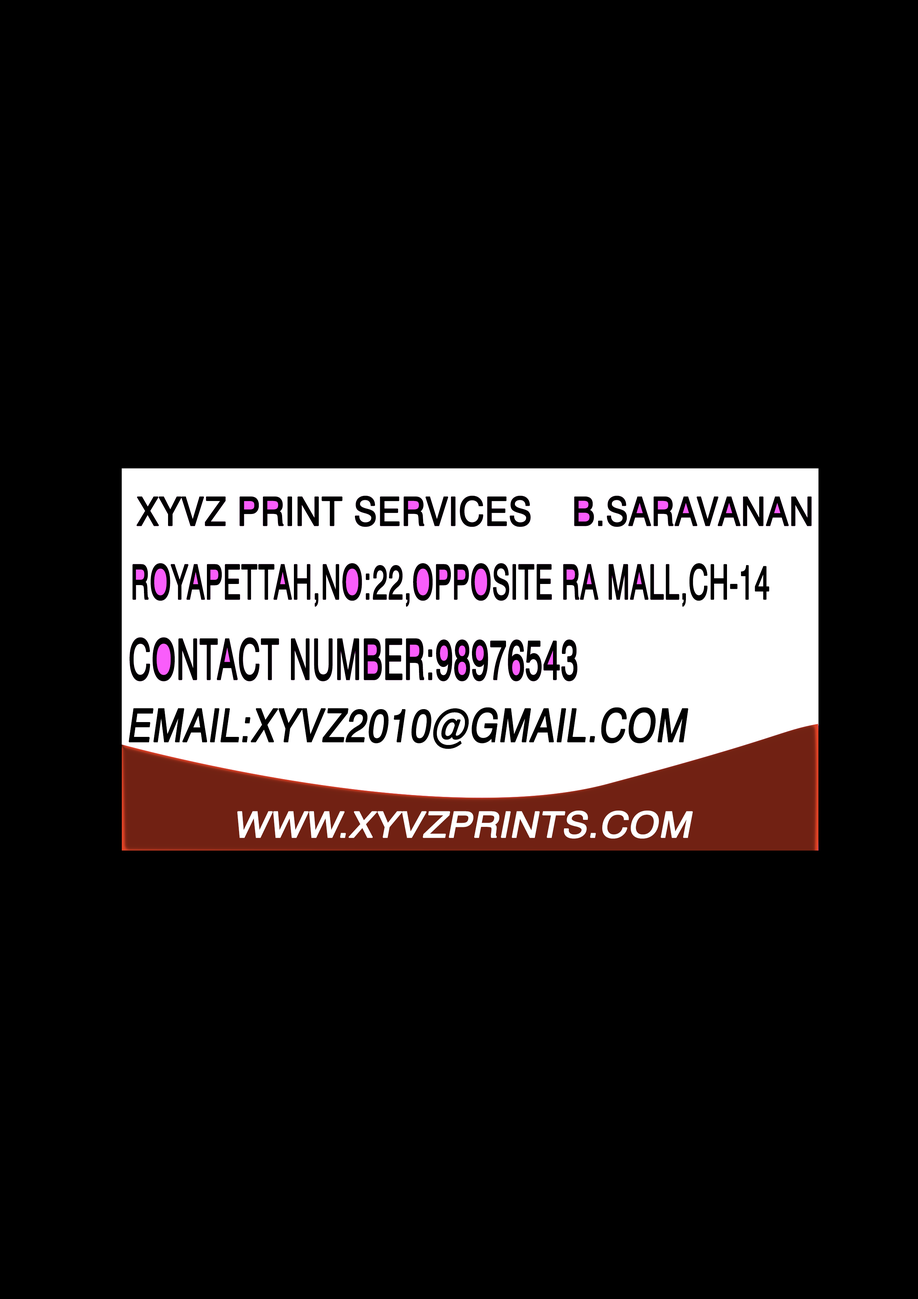
<style>
.page{position:relative;width:918px;height:1299px;background:#000000}
.page>*{position:absolute;margin:0}
.t1{font:39.6px "Swiss721BT-Roman";color:#000000;text-transform:uppercase;font-weight:bold;scale:0.9 1}
.t2{font:39.6px "Swiss721BT-Roman";color:#000000;text-transform:uppercase;font-weight:bold;scale:0.86 1}
.t3{font:47.7px "Swiss721BT-Roman";color:#000000;text-transform:uppercase;font-weight:bold;scale:0.58 1}
.t4{font:55.8px "Swiss721BT-Roman";color:#000000;text-transform:uppercase;font-weight:bold;scale:0.56 1}
.t5{font:45.7px "Swiss721BT-Roman";color:#000000;text-transform:uppercase;font-weight:bold;font-style:italic;scale:0.81 1}
.t6{font:35.5px "Swiss721BT-Roman";color:#ffffff;text-transform:uppercase;font-weight:bold;font-style:italic;scale:1.08 1}
</style>
<div class="page">
<p class="t1" style="left:136px;top:495px;width:395px;height:32px">xyvz print services</p>
<p class="t2" style="left:574px;top:495px;width:238px;height:32px">b.saravanan</p>
<p class="t3" style="left:133px;top:563px;width:636px;height:44px">royapettah,no:22,opposite ra mall,ch-14</p>
<p class="t4" style="left:130px;top:637px;width:448px;height:44px">contact number:98976543</p>
<p class="t5" style="left:128px;top:707px;width:561px;height:42px">email:xyvz2010@gmail.com</p>
<p class="t6" style="left:237px;top:810px;width:456px;height:29px">www.xyvzprints.com</p>
</div>
